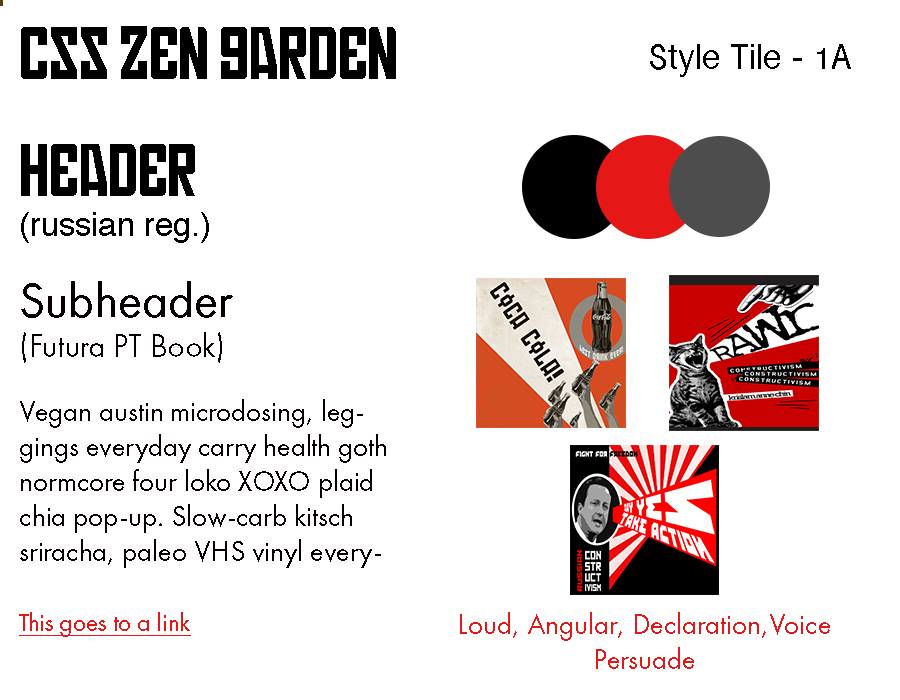
<style>
.page{position:relative;width:900px;height:700px;background:#ffffff}
.page>*{position:absolute;margin:0}
.t1{font:62.5px "Russian";color:#000000}
.t2{font:37.5px "InaiMathi";color:#000000}
.t3{font:33.3px "Helvetica";color:#000000}
.t4{font:33.3px "FuturaPT-Book";color:#080000}
.t5{font:50px "FuturaPT-Book";color:#080000}
.t6{font:29.2px "FuturaPT-Book";color:#080000}
.t7{font:25px "FuturaPT-Book";color:#e51717;text-decoration:underline}
.t8{font:29.2px "FuturaPT-Book";color:#e51717}
</style>
<div class="page">
<p class="t1" style="left:21px;top:26px;width:375px;height:53px">CSS Zen Garden</p>
<p class="t2" style="left:650px;top:44px;width:201px;height:33px">Style Tile - 1A</p>
<p class="t3" style="left:21px;top:144px;width:188px;height:99px"><span class="t1">Header<br></span>(russian reg.)</p>
<p class="t4" style="left:21px;top:281px;width:212px;height:82px"><span class="t5">Subheader<br></span>(Futura PT Book)</p>
<p class="t6" style="left:20px;top:399px;width:366px;height:169px">Vegan austin microdosing, leggings everyday carry health goth normcore four loko XOXO plaid chia pop-up. Slow-carb kitsch sriracha, paleo VHS vinyl everyday carry umami squid pour-over.</p>
<p class="t7" style="left:19px;top:612px;width:172px;height:25px">This goes to a link</p>
<p class="t8" style="left:460px;top:612px;width:370px;height:57px;text-align:center">Loud, Angular, Declaration,Voice<br>Persuade</p>
</div>
